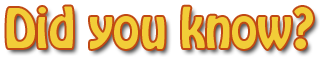
<style>
.page{position:relative;width:322px;height:57px;background:#ffffff}
.page>*{position:absolute;margin:0}
.t1{font:48px "HoboStd";color:#f2cd38}
</style>
<div class="page">
<p class="t1" style="left:6px;top:6px;width:307px;height:43px">Did you know?</p>
</div>
